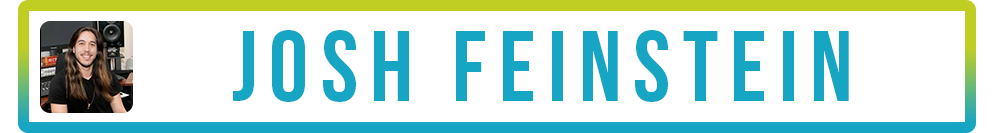
<style>
.page{position:relative;width:1000px;height:133px;background:#ffffff}
.page>*{position:absolute;margin:0}
.t1{font:100px "BebasNeue";letter-spacing:0.12em;color:#16a6c4}
</style>
<div class="page">
<p class="t1" style="left:233px;top:30px;width:616px;height:72px">Josh Feinstein</p>
</div>
